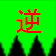
<style>
.page{position:relative;width:56px;height:56px;background:#00ff00}
.page>*{position:absolute;margin:0}
.t1{font:28px "MS-PGothic";color:#ff0000}
</style>
<div class="page">
<p class="t1" style="left:16px;top:8px;width:26px;height:26px">逆</p>
</div>
